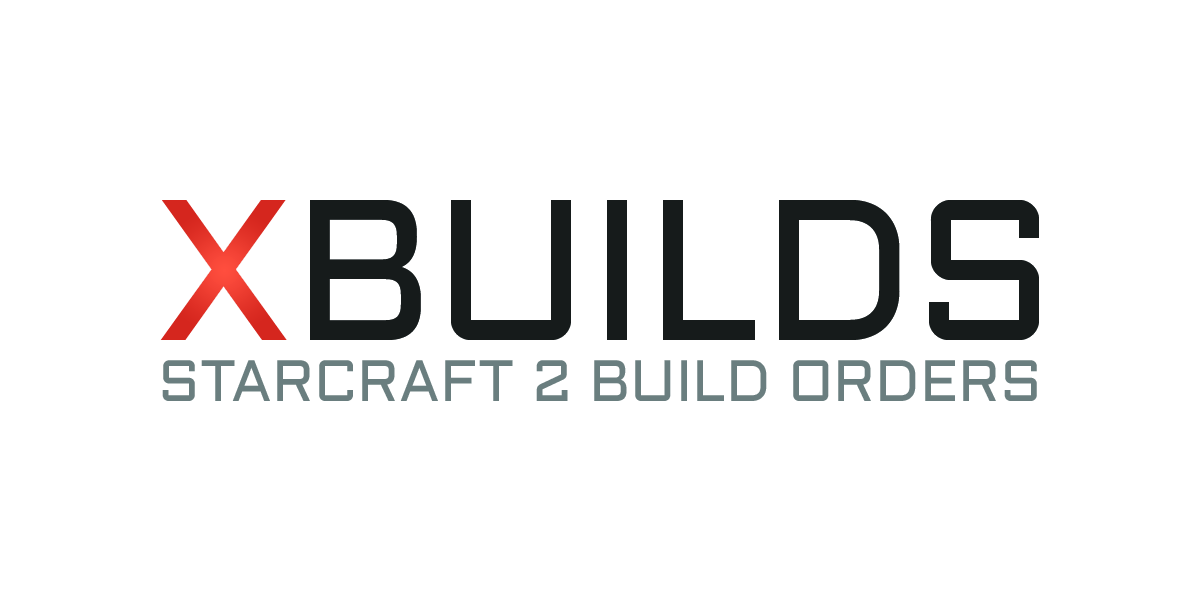
<style>
.page{position:relative;width:1200px;height:600px;background:#ffffff}
.page>*{position:absolute;margin:0}
.t1{font:200px "Aldrich";color:#161b1b}
.t2{font:200px "Aldrich";color:#d5261e}
.t3{font:58.3px "Aldrich";color:#6b7e7f}
</style>
<div class="page">
<p class="t1" style="left:160px;top:200px;width:879px;height:140px"><span class="t2">X</span>BUILDS</p>
<p class="t3" style="left:162px;top:360px;width:875px;height:41px">STARCRAFT 2 BUILD ORDERS</p>
</div>
